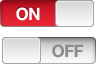
<style>
.page{position:relative;width:96px;height:64px}
.page>*{position:absolute;margin:0}
.t1{font:17px "HelveticaNeue-Bold";letter-spacing:-0.04em;color:#ffffff}
.t2{font:17px "HelveticaNeue-Bold";letter-spacing:-0.04em;color:#8b8b8b}
</style>
<div class="page">
<p class="t1" style="left:16px;top:7px;width:24px;height:14px">ON</p>
<p class="t2" style="left:52px;top:44px;width:32px;height:14px">OFF</p>
</div>
